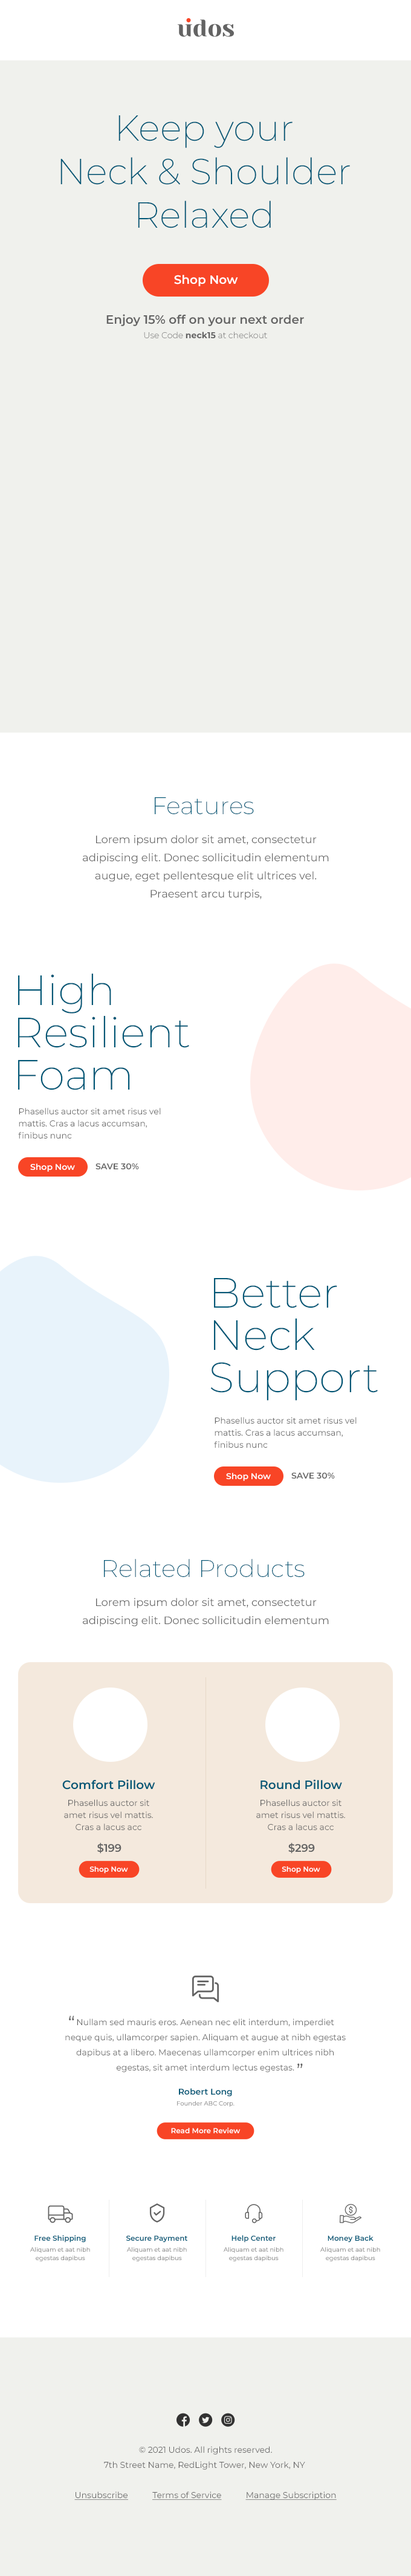
<style>
.page{position:relative;width:411px;height:2576px;background:#ffffff}
.page>*{position:absolute;margin:0}
.t1{font:36.2px "Montserrat-ExtraLight";color:#005776}
.t2{font:12.1px "Montserrat-SemiBold";color:#ffffff}
.t3{font:12.1px "Montserrat-SemiBold";color:#636363}
.t4{font:8.5px "Montserrat-Light";color:#636363}
.t5{font:8.5px "Montserrat-Bold";color:#636363}
.t6{font:24.2px "Montserrat-ExtraLight";color:#005776}
.t7{font:10.9px/18.1px "Montserrat-Regular";color:#636363}
.t8{font:42.3px/42.3px "Montserrat-ExtraLight";color:#005776}
.t9{font:8.5px/12.1px "Montserrat-Regular";color:#636363}
.t10{font:8.5px "Montserrat-SemiBold";color:#ffffff}
.t11{font:8.5px "Montserrat-SemiBold";color:#636363}
.t12{font:12.1px "Montserrat-SemiBold";color:#005776}
.t13{font:10.9px "Montserrat-SemiBold";color:#636363}
.t14{font:7.2px "Montserrat-SemiBold";color:#ffffff}
.t15{font:8.5px/15.1px "Montserrat-Regular";color:#636363}
.t16{font:18.1px "Montserrat-Regular";color:#636363}
.t17{font:8.5px "Montserrat-SemiBold";color:#005776}
.t18{font:6px "Montserrat-Regular"}
.t19{font:7.2px "Montserrat-SemiBold";color:#005776}
.t20{font:6px/8.5px "Montserrat-Regular"}
.t21{font:8.5px/15.1px "Montserrat-Regular";color:#636363;text-decoration:underline}
</style>
<div class="page">
<p class="t1" style="left:60px;top:115px;width:290px;height:113px;text-align:center">Keep your<br>Neck &amp; Shoulder<br>Relaxed</p>
<p class="t2" style="left:174px;top:275px;width:64px;height:11px">Shop Now</p>
<p class="t3" style="left:106px;top:314px;width:198px;height:12px">Enjoy 15% off on your next order</p>
<p class="t4" style="left:144px;top:332px;width:123px;height:7px">Use Code <span class="t5">neck15</span> at checkout</p>
<p class="t6" style="left:155px;top:797px;width:99px;height:17px">Features</p>
<p class="t7" style="left:83px;top:835px;width:246px;height:65px;text-align:center">Lorem ipsum dolor sit amet, consectetur adipiscing elit. Donec sollicitudin elementum augue, eget pellentesque elit ultrices vel. Praesent arcu turpis,</p>
<p class="t8" style="left:18px;top:974px;width:171px;height:116px">High<br>Resilient<br>Foam</p>
<p class="t9" style="left:18px;top:1108px;width:143px;height:31px">Phasellus auctor sit amet risus vel mattis. Cras a lacus accumsan,<br>finibus nunc</p>
<p class="t10" style="left:30px;top:1163px;width:45px;height:9px">Shop Now</p>
<p class="t11" style="left:95px;top:1163px;width:44px;height:7px">SAVE 30%</p>
<p class="t8" style="left:210px;top:1278px;width:167px;height:123px">Better<br>Neck<br>Support</p>
<p class="t9" style="left:214px;top:1417px;width:142px;height:31px">Phasellus auctor sit amet risus vel mattis. Cras a lacus accumsan,<br>finibus nunc</p>
<p class="t10" style="left:226px;top:1473px;width:45px;height:8px">Shop Now</p>
<p class="t11" style="left:291px;top:1473px;width:44px;height:6px">SAVE 30%</p>
<p class="t6" style="left:104px;top:1559px;width:200px;height:18px">Related Products</p>
<p class="t7" style="left:83px;top:1598px;width:246px;height:29px;text-align:center">Lorem ipsum dolor sit amet, consectetur adipiscing elit. Donec sollicitudin elementum</p>
<p class="t12" style="left:62px;top:1779px;width:93px;height:11px">Comfort Pillow</p>
<p class="t12" style="left:260px;top:1779px;width:82px;height:11px">Round Pillow</p>
<p class="t9" style="left:64px;top:1799px;width:89px;height:31px;text-align:center">Phasellus auctor sit amet risus vel mattis. Cras a lacus acc</p>
<p class="t9" style="left:256px;top:1799px;width:89px;height:31px;text-align:center">Phasellus auctor sit amet risus vel mattis. Cras a lacus acc</p>
<p class="t13" style="left:97px;top:1843px;width:24px;height:11px">$199</p>
<p class="t13" style="left:288px;top:1843px;width:27px;height:11px">$299</p>
<p class="t14" style="left:89px;top:1866px;width:39px;height:8px">Shop Now</p>
<p class="t14" style="left:281px;top:1866px;width:39px;height:8px">Shop Now</p>
<p class="t15" style="left:65px;top:2019px;width:280px;height:53px;text-align:center">Nullam sed mauris eros. Aenean nec elit interdum, imperdiet neque quis, ullamcorper sapien. Aliquam et augue at nibh egestas dapibus at a libero. Maecenas ullamcorper enim ultrices nibh egestas, sit amet interdum lectus egestas.</p>
<p class="t16" style="left:69px;top:2016px;width:5px;height:4px">“</p>
<p class="t16" style="left:297px;top:2063px;width:6px;height:5px">”</p>
<p class="t17" style="left:179px;top:2088px;width:53px;height:8px">Robert Long</p>
<p class="t18" style="left:177px;top:2101px;width:57px;height:6px">Founder ABC Corp.</p>
<p class="t14" style="left:171px;top:2127px;width:69px;height:6px">Read More Review</p>
<p class="t19" style="left:34px;top:2235px;width:52px;height:8px">Free Shipping</p>
<p class="t19" style="left:126px;top:2235px;width:61px;height:8px">Secure Payment</p>
<p class="t19" style="left:231px;top:2235px;width:44px;height:8px">Help Center</p>
<p class="t19" style="left:327px;top:2235px;width:46px;height:8px">Money Back</p>
<p class="t20" style="left:30px;top:2247px;width:60px;height:14px;text-align:center">Aliquam et aat nibh egestas dapibus</p>
<p class="t20" style="left:127px;top:2247px;width:60px;height:14px;text-align:center">Aliquam et aat nibh egestas dapibus</p>
<p class="t20" style="left:223px;top:2247px;width:60px;height:14px;text-align:center">Aliquam et aat nibh egestas dapibus</p>
<p class="t20" style="left:320px;top:2247px;width:60px;height:14px;text-align:center">Aliquam et aat nibh egestas dapibus</p>
<p class="t15" style="left:74px;top:2446px;width:262px;height:54px;text-align:center">© 2021 Udos. All rights reserved.<br>7th Street Name, RedLight Tower, New York, NY <br><br><span class="t21">Unsubscribe           Terms of Service           Manage Subscription</span></p>
</div>
